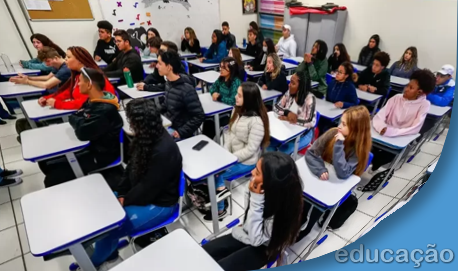
<style>
.page{position:relative;width:458px;height:271px}
.page>*{position:absolute;margin:0}
.t1{font:25px "ArialRoundedMTBold";color:#91bcdc}
</style>
<div class="page">
<p class="t1" style="left:335px;top:243px;width:119px;height:24px">educação</p>
</div>
